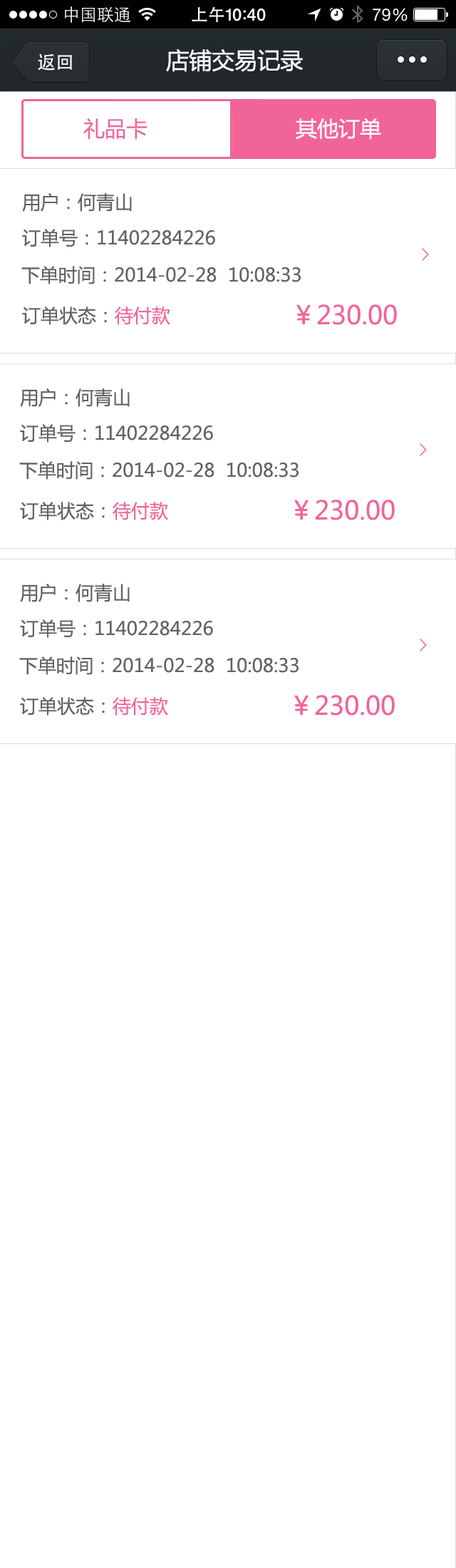
<style>
.page{position:relative;width:456px;height:1568px;background:#ffffff}
.page>*{position:absolute;margin:0}
.t1{font:22.8px "MicrosoftYaHei";color:#ffffff}
.t2{font:21.4px "MicrosoftYaHei";color:#f16498}
.t3{font:21.4px "MicrosoftYaHei";color:#ffffff}
.t4{font:18.5px "MicrosoftYaHei";color:#636363}
.t5{font:25.7px "MicrosoftYaHei";color:#f16498}
.t6{font:18.5px "MicrosoftYaHei";color:#f16498}
</style>
<div class="page">
<p class="t1" style="left:166px;top:48px;width:137px;height:24px">店铺交易记录</p>
<p class="t2" style="left:83px;top:118px;width:65px;height:22px">礼品卡</p>
<p class="t3" style="left:296px;top:118px;width:85px;height:22px">其他订单</p>
<p class="t4" style="left:22px;top:193px;width:110px;height:19px">用户：何青山</p>
<p class="t4" style="left:22px;top:229px;width:193px;height:18px">订单号：11402284226</p>
<p class="t4" style="left:21px;top:266px;width:280px;height:18px">下单时间：2014-02-28  10:08:33</p>
<p class="t5" style="left:296px;top:304px;width:101px;height:21px">￥230.00</p>
<p class="t4" style="left:22px;top:306px;width:148px;height:19px">订单状态：<span class="t6">待付款</span></p>
<p class="t4" style="left:20px;top:388px;width:110px;height:19px">用户：何青山</p>
<p class="t4" style="left:20px;top:424px;width:193px;height:19px">订单号：11402284226</p>
<p class="t4" style="left:19px;top:461px;width:280px;height:19px">下单时间：2014-02-28  10:08:33</p>
<p class="t4" style="left:20px;top:502px;width:148px;height:18px">订单状态：<span class="t6">待付款</span></p>
<p class="t5" style="left:294px;top:500px;width:101px;height:20px">￥230.00</p>
<p class="t4" style="left:20px;top:584px;width:110px;height:18px">用户：何青山</p>
<p class="t4" style="left:20px;top:619px;width:193px;height:19px">订单号：11402284226</p>
<p class="t4" style="left:19px;top:656px;width:280px;height:19px">下单时间：2014-02-28  10:08:33</p>
<p class="t4" style="left:20px;top:697px;width:148px;height:19px">订单状态：<span class="t6">待付款</span></p>
<p class="t5" style="left:294px;top:695px;width:101px;height:21px">￥230.00</p>
</div>
